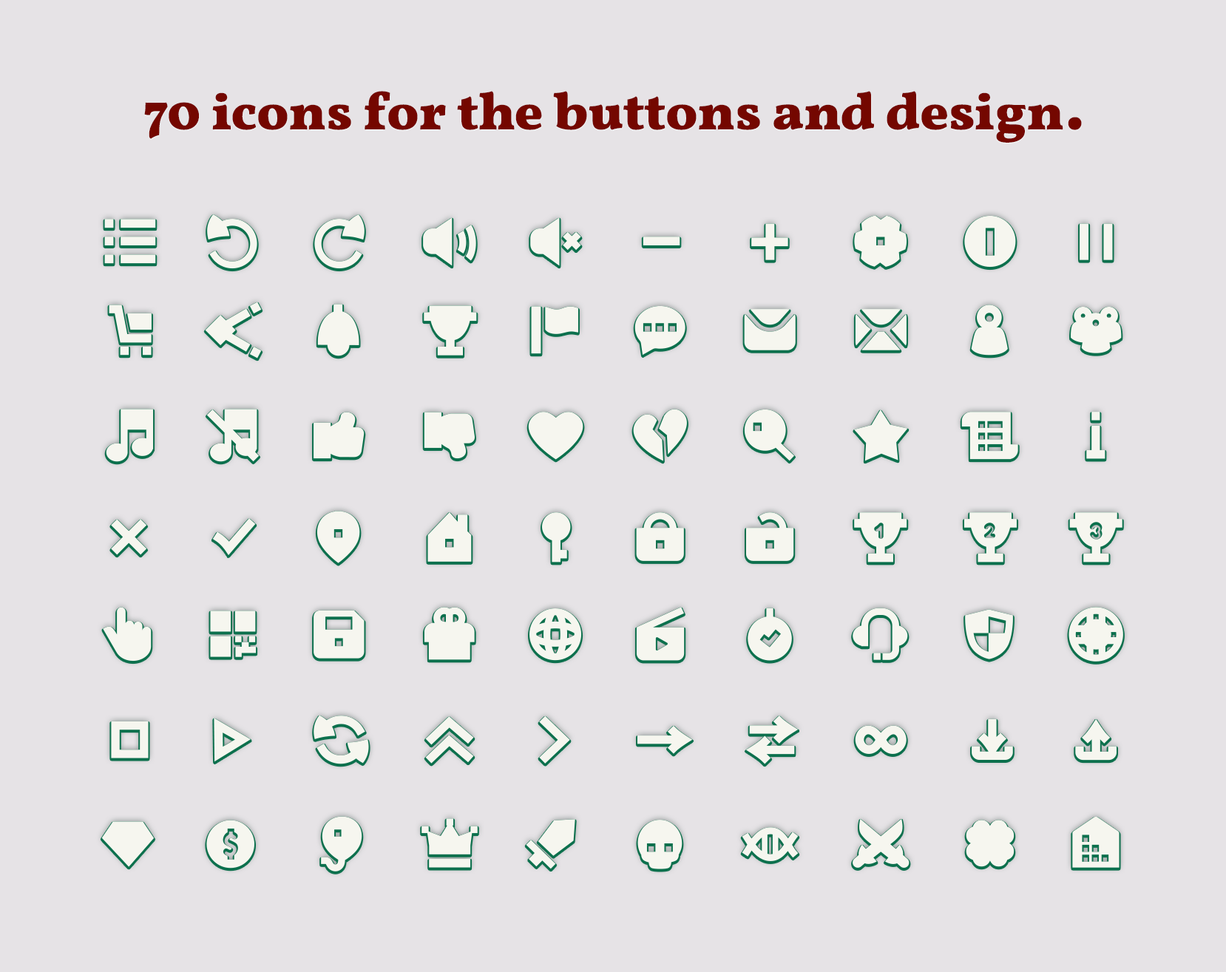
<style>
.page{position:relative;width:1226px;height:972px;background:#e6e3e6}
.page>*{position:absolute;margin:0}
.t1{font:53.3px "Vollkorn-Black";color:#740700}
</style>
<div class="page">
<p class="t1" style="left:144px;top:91px;width:938px;height:52px">70 icons for the buttons and design.</p>
</div>
